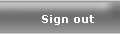
<style>
.page{position:relative;width:120px;height:34px}
.page>*{position:absolute;margin:0}
.t1{font:11px "Verdana-Bold";color:#ffffff}
</style>
<div class="page">
<p class="t1" style="left:42px;top:15px;width:52px;height:10px">Sign out</p>
</div>
